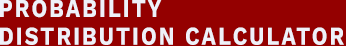
<style>
.page{position:relative;width:346px;height:46px;background:#940000}
.page>*{position:absolute;margin:0}
.t1{font:25.9px/27.8px "WorkSansRoman-Bold";letter-spacing:0.1em;color:#eff1f9;scale:0.82 1}
</style>
<div class="page">
<p class="t1" style="left:0px;top:0px;width:344px;height:45px">PROBABILITY<br>DISTRIBUTION CALCULATOR</p>
</div>
